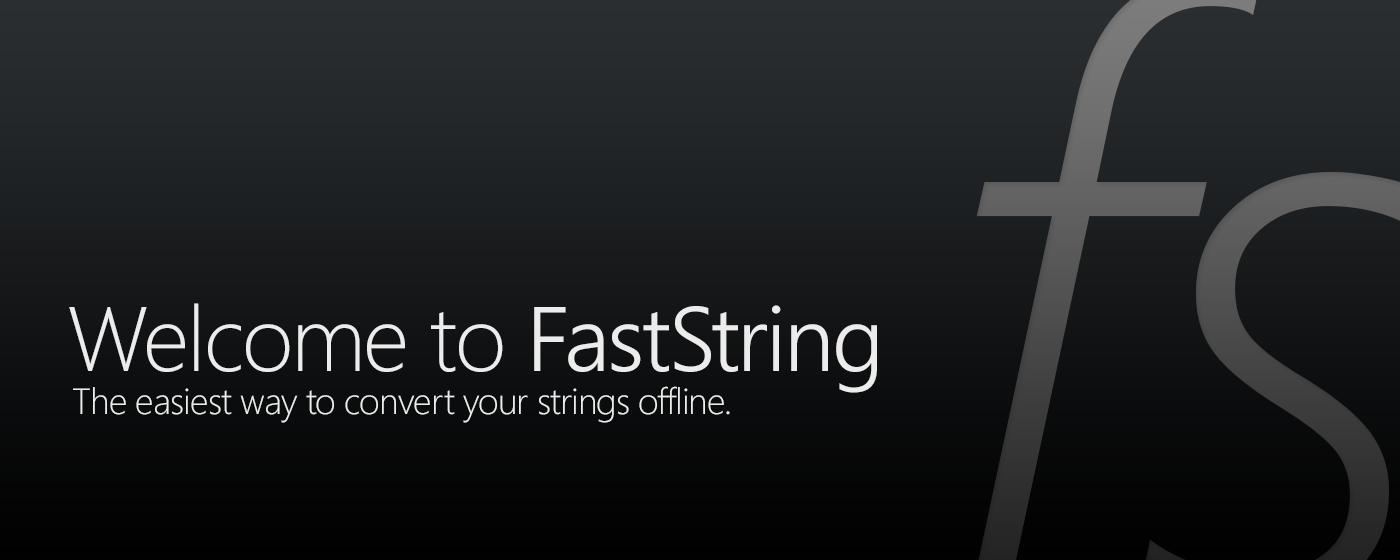
<style>
.page{position:relative;width:1400px;height:560px}
.page>*{position:absolute;margin:0}
.t1{font:91.2px "SegoeUI-Light";letter-spacing:-0.025em;color:#ececec}
.t2{font:91.2px "SegoeUI-Semilight";letter-spacing:-0.025em;color:#ececec}
.t3{font:36.5px "SegoeUI-Light";letter-spacing:-0.025em;color:#ececec}
</style>
<div class="page">
<p class="t1" style="left:69px;top:303px;width:808px;height:90px">Welcome to <span class="t2">FastString</span></p>
<p class="t3" style="left:73px;top:386px;width:657px;height:37px">The easiest way to convert your strings offline.</p>
</div>
